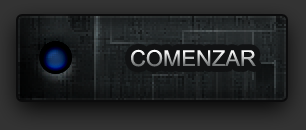
<style>
.page{position:relative;width:306px;height:130px}
.page>*{position:absolute;margin:0}
.t1{font:22px "ArialMT"}
</style>
<div class="page">
<p class="t1" style="left:131px;top:49px;width:125px;height:18px">COMENZAR</p>
</div>
